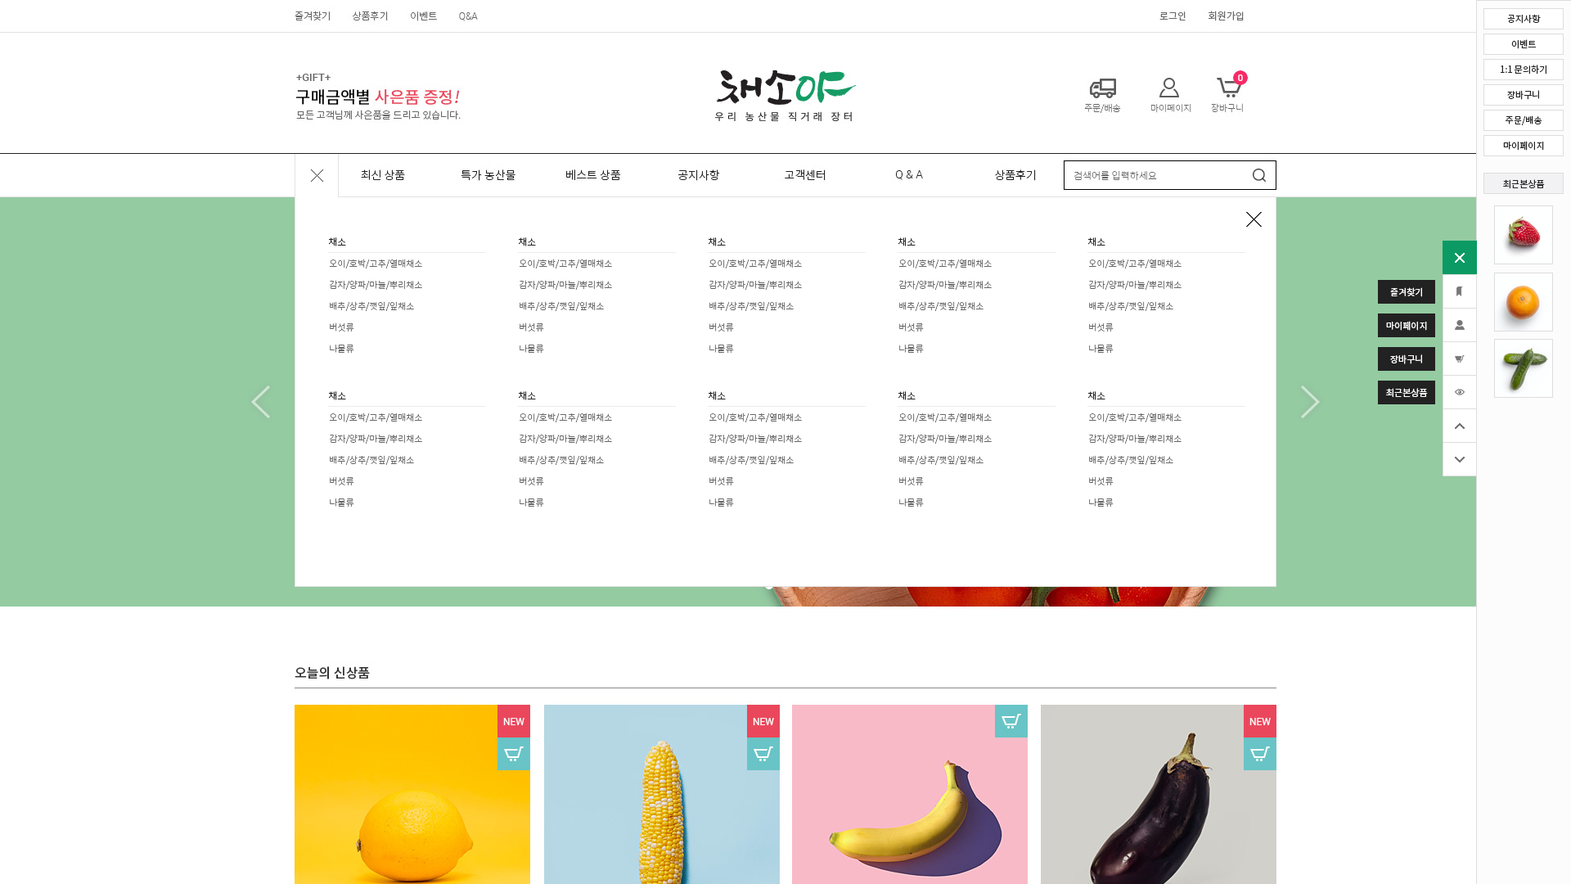
<style>
.page{position:relative;width:1571px;height:884px;background:#ffffff}
.page>*{position:absolute;margin:0}
.t1{font:9px "NotoSansCJKkr-Regular";color:#222222}
.t2{font:9.8px "NotoSansCJKkr-Light";color:#222222}
.t3{font:9px/21.3px "NotoSansCJKkr-Light";color:#666666}
.t4{font:9px "NotoSansCJKkr-Regular";color:#ffffff}
</style>
<div class="page">
<p class="t1" style="left:1507px;top:14px;width:34px;height:10px">공지사항</p>
<p class="t1" style="left:1511px;top:39px;width:25px;height:10px">이벤트</p>
<p class="t1" style="left:1501px;top:65px;width:45px;height:9px">1:1 문의하기</p>
<p class="t1" style="left:1507px;top:90px;width:32px;height:10px">장바구니</p>
<p class="t1" style="left:1505px;top:115px;width:37px;height:10px">주문/배송</p>
<p class="t1" style="left:1503px;top:141px;width:41px;height:10px">마이페이지</p>
<p class="t1" style="left:1503px;top:179px;width:42px;height:9px">최근본상품</p>
<p class="t2" style="left:329px;top:237px;width:17px;height:9px">채소</p>
<p class="t2" style="left:519px;top:237px;width:17px;height:9px">채소</p>
<p class="t2" style="left:709px;top:237px;width:17px;height:9px">채소</p>
<p class="t2" style="left:898px;top:237px;width:18px;height:9px">채소</p>
<p class="t2" style="left:1088px;top:237px;width:17px;height:9px">채소</p>
<p class="t3" style="left:330px;top:259px;width:92px;height:94px">오이/호박/고추/열매채소<br>감자/양파/마늘/뿌리채소<br>배추/상추/깻잎/잎채소<br>버섯류<br>나물류</p>
<p class="t3" style="left:520px;top:259px;width:92px;height:94px">오이/호박/고추/열매채소<br>감자/양파/마늘/뿌리채소<br>배추/상추/깻잎/잎채소<br>버섯류<br>나물류</p>
<p class="t3" style="left:709px;top:259px;width:93px;height:94px">오이/호박/고추/열매채소<br>감자/양파/마늘/뿌리채소<br>배추/상추/깻잎/잎채소<br>버섯류<br>나물류</p>
<p class="t3" style="left:899px;top:259px;width:93px;height:94px">오이/호박/고추/열매채소<br>감자/양파/마늘/뿌리채소<br>배추/상추/깻잎/잎채소<br>버섯류<br>나물류</p>
<p class="t3" style="left:1089px;top:259px;width:92px;height:94px">오이/호박/고추/열매채소<br>감자/양파/마늘/뿌리채소<br>배추/상추/깻잎/잎채소<br>버섯류<br>나물류</p>
<p class="t4" style="left:1390px;top:287px;width:32px;height:10px">즐겨찾기</p>
<p class="t4" style="left:1386px;top:321px;width:41px;height:10px">마이페이지</p>
<p class="t4" style="left:1390px;top:354px;width:32px;height:10px">장바구니</p>
<p class="t4" style="left:1386px;top:388px;width:42px;height:9px">최근본상품</p>
<p class="t2" style="left:329px;top:391px;width:17px;height:9px">채소</p>
<p class="t2" style="left:519px;top:391px;width:17px;height:9px">채소</p>
<p class="t2" style="left:709px;top:391px;width:17px;height:9px">채소</p>
<p class="t2" style="left:898px;top:391px;width:18px;height:9px">채소</p>
<p class="t2" style="left:1088px;top:391px;width:17px;height:9px">채소</p>
<p class="t3" style="left:330px;top:412px;width:92px;height:95px">오이/호박/고추/열매채소<br>감자/양파/마늘/뿌리채소<br>배추/상추/깻잎/잎채소<br>버섯류<br>나물류</p>
<p class="t3" style="left:520px;top:412px;width:92px;height:95px">오이/호박/고추/열매채소<br>감자/양파/마늘/뿌리채소<br>배추/상추/깻잎/잎채소<br>버섯류<br>나물류</p>
<p class="t3" style="left:709px;top:412px;width:93px;height:95px">오이/호박/고추/열매채소<br>감자/양파/마늘/뿌리채소<br>배추/상추/깻잎/잎채소<br>버섯류<br>나물류</p>
<p class="t3" style="left:899px;top:412px;width:93px;height:95px">오이/호박/고추/열매채소<br>감자/양파/마늘/뿌리채소<br>배추/상추/깻잎/잎채소<br>버섯류<br>나물류</p>
<p class="t3" style="left:1089px;top:412px;width:92px;height:95px">오이/호박/고추/열매채소<br>감자/양파/마늘/뿌리채소<br>배추/상추/깻잎/잎채소<br>버섯류<br>나물류</p>
</div>
